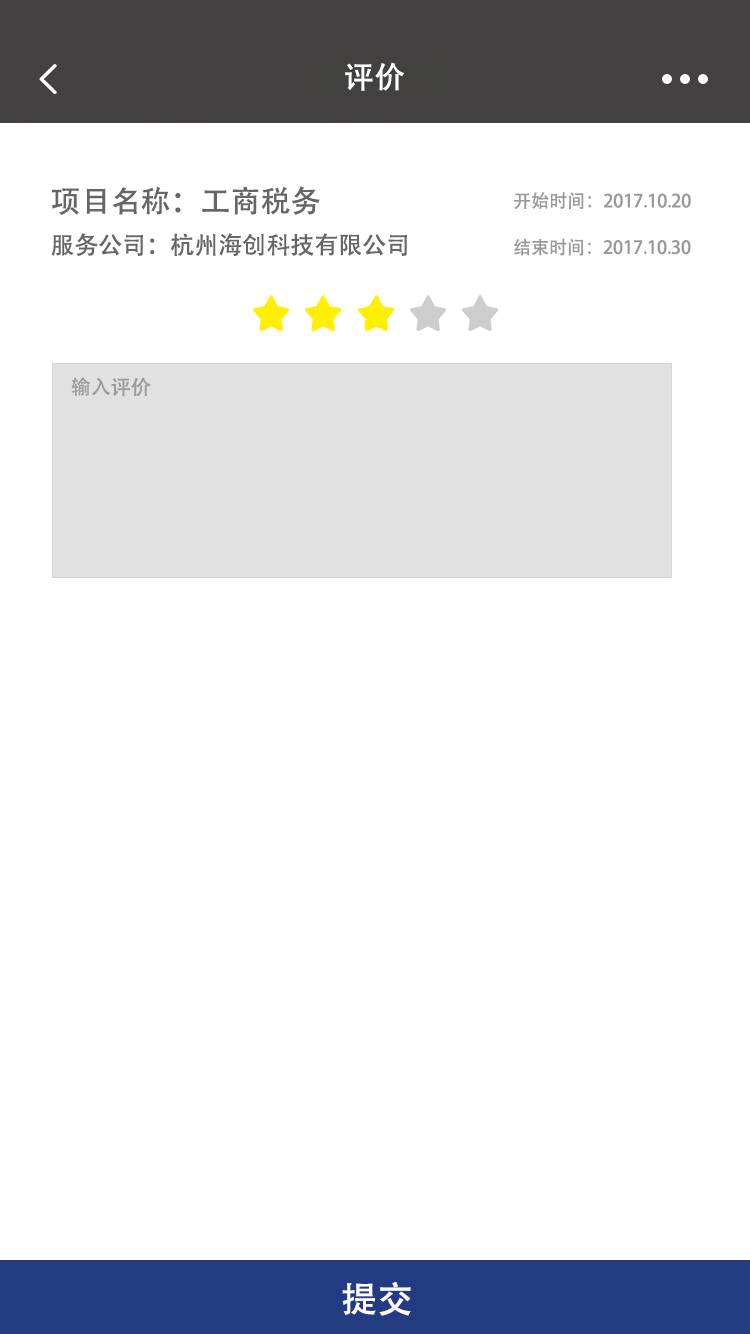
<style>
.page{position:relative;width:750px;height:1334px;background:#ffffff}
.page>*{position:absolute;margin:0}
.t1{font:30px "AdobeHeitiStd-Regular";color:#ffffff}
.t2{font:30px "AdobeHeitiStd-Regular";color:#666666}
.t3{font:18px "AdobeHeitiStd-Regular";color:#999999}
.t4{font:24px "AdobeHeitiStd-Regular";color:#666666}
.t5{font:20px "AdobeHeitiStd-Regular";color:#9b9b9b}
.t6{font:36px "AdobeHeitiStd-Regular";color:#ffffff}
</style>
<div class="page">
<p class="t1" style="left:345px;top:62px;width:59px;height:29px">评价</p>
<p class="t2" style="left:51px;top:186px;width:269px;height:29px">项目名称：工商税务</p>
<p class="t3" style="left:514px;top:192px;width:177px;height:17px">开始时间：2017.10.20</p>
<p class="t4" style="left:51px;top:233px;width:356px;height:24px">服务公司：杭州海创科技有限公司</p>
<p class="t3" style="left:514px;top:238px;width:177px;height:18px">结束时间：2017.10.30</p>
<p class="t5" style="left:71px;top:377px;width:80px;height:20px">输入评价</p>
<p class="t6" style="left:342px;top:1282px;width:69px;height:34px">提交</p>
</div>
